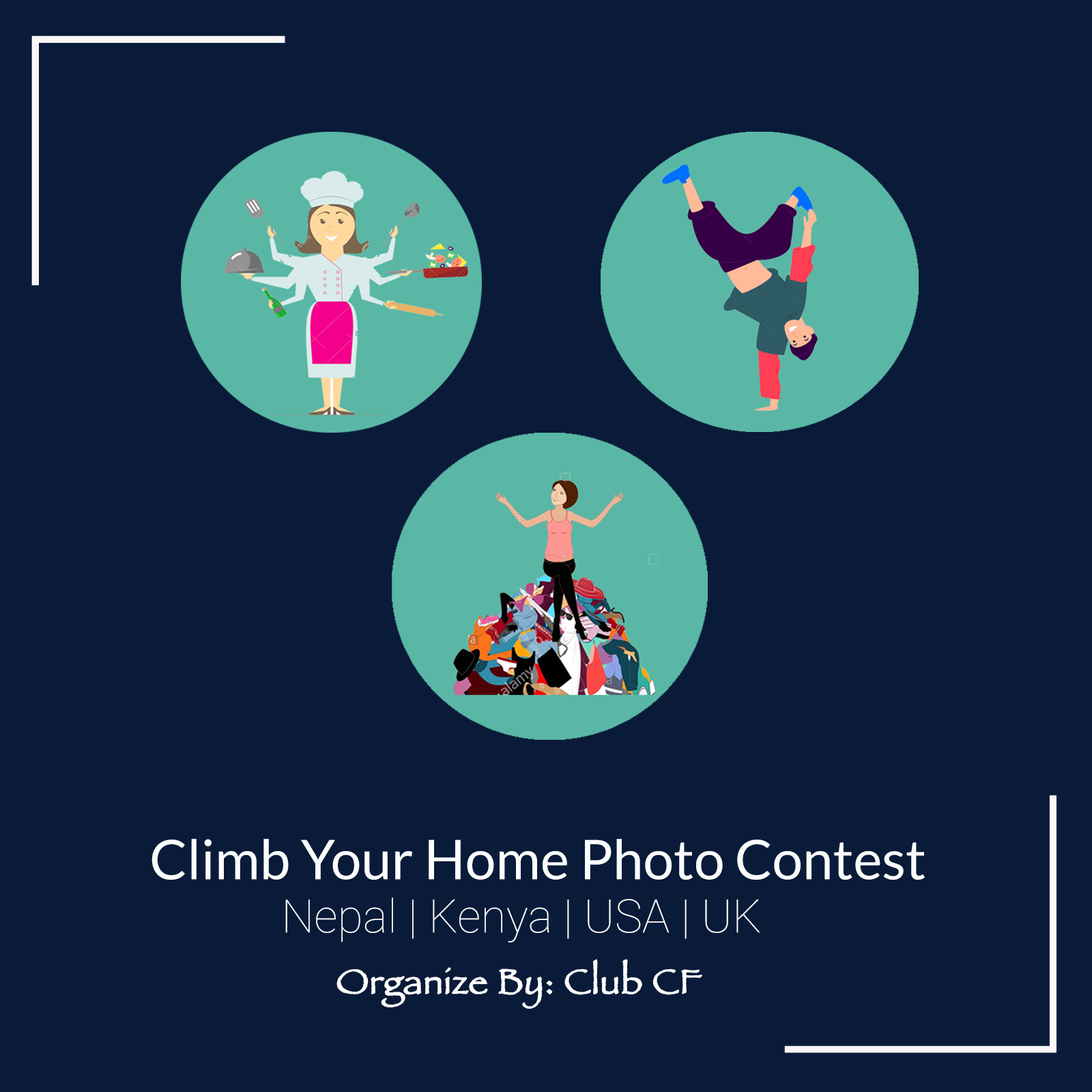
<style>
.page{position:relative;width:1092px;height:1092px;background:#091b39}
.page>*{position:absolute;margin:0}
.t1{font:54.6px "Lato-Regular";color:#fcfdfd}
.t2{font:46.4px "Roboto-Thin";color:#fcfdfd}
.t3{font:35.5px "Papyrus";color:#fefefe;font-weight:bold}
</style>
<div class="page">
<p class="t1" style="left:152px;top:839px;width:773px;height:41px">Climb Your Home Photo Contest</p>
<p class="t2" style="left:285px;top:897px;width:475px;height:46px">Nepal | Kenya | USA | UK</p>
<p class="t3" style="left:336px;top:959px;width:366px;height:50px">Organize By: Club CF</p>
</div>
